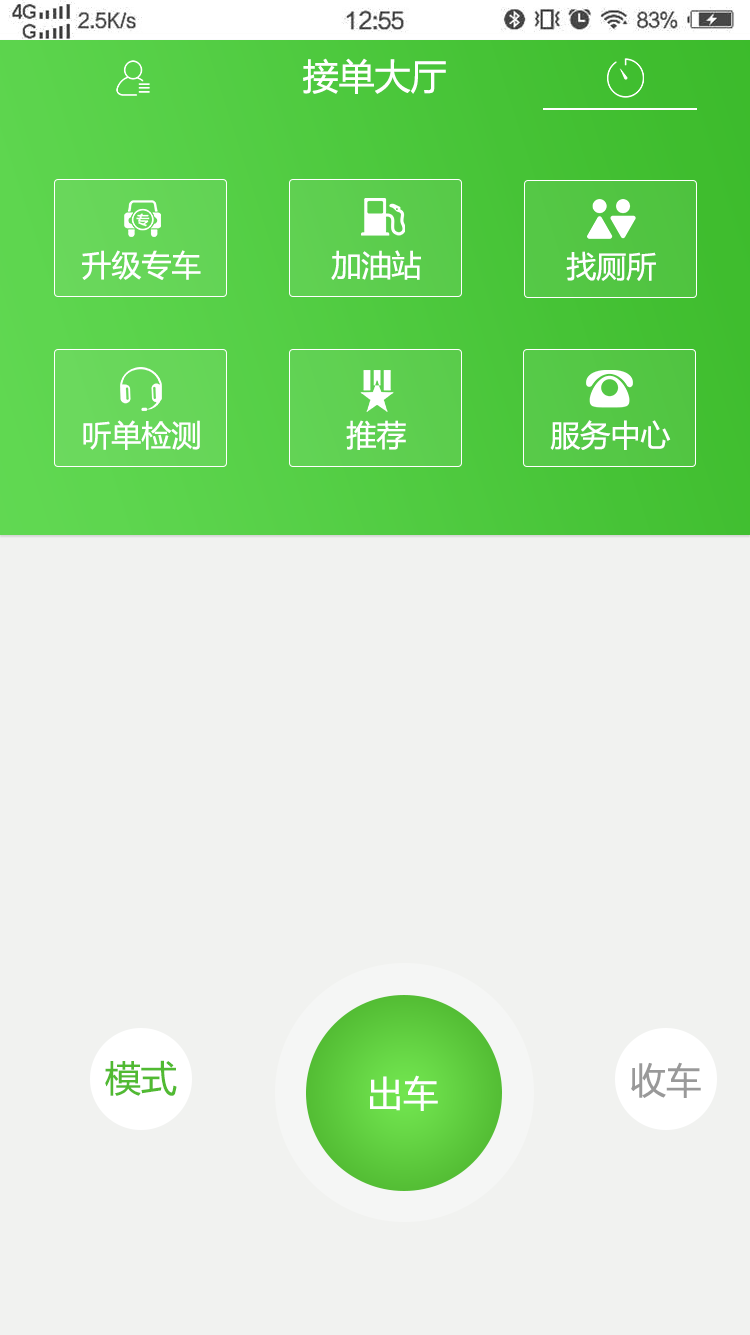
<style>
.page{position:relative;width:750px;height:1335px;background:#f1f2f0}
.page>*{position:absolute;margin:0}
.t1{font:36px "MicrosoftYaHei";color:#fffffe;text-transform:uppercase}
.t2{font:30px "MicrosoftYaHei";color:#ffffff;text-transform:uppercase}
.t3{font:36px "MicrosoftYaHei";color:#51ba32;text-transform:uppercase}
.t4{font:36px "MicrosoftYaHei";color:#999999;text-transform:uppercase}
.t5{font:36px "MicrosoftYaHei";color:#ffffff;text-transform:uppercase}
</style>
<div class="page">
<p class="t1" style="left:303px;top:58px;width:143px;height:36px">接单大厅</p>
<p class="t2" style="left:82px;top:250px;width:119px;height:30px">升级专车</p>
<p class="t2" style="left:331px;top:250px;width:90px;height:30px">加油站</p>
<p class="t2" style="left:566px;top:251px;width:90px;height:30px">找厕所</p>
<p class="t2" style="left:83px;top:420px;width:117px;height:30px">听单检测</p>
<p class="t2" style="left:346px;top:420px;width:60px;height:30px">推荐</p>
<p class="t2" style="left:550px;top:420px;width:121px;height:30px">服务中心</p>
<p class="t3" style="left:105px;top:1060px;width:72px;height:36px">模式</p>
<p class="t4" style="left:631px;top:1062px;width:70px;height:36px">收车</p>
<p class="t5" style="left:370px;top:1075px;width:68px;height:36px">出车</p>
</div>
